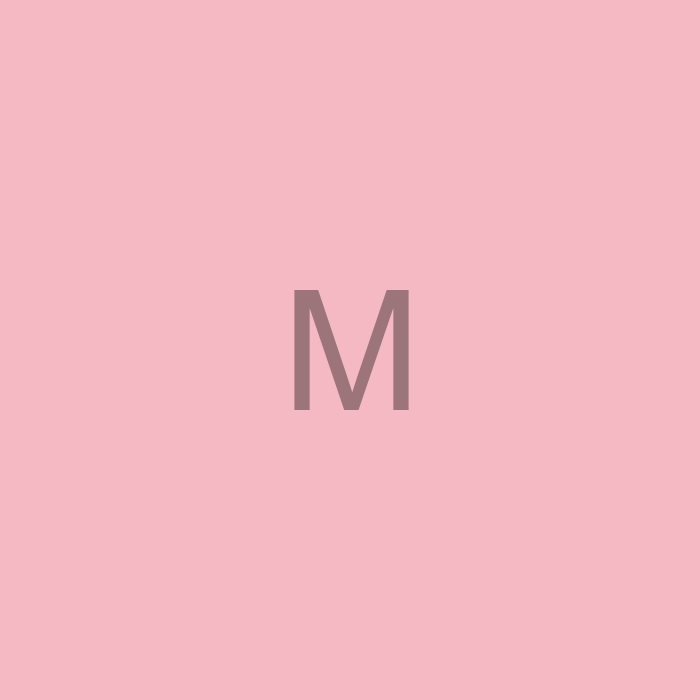
<style>
.page{position:relative;width:700px;height:700px;background:#f4b9c2}
.page>*{position:absolute;margin:0}
.t1{font:166.7px "ArialMT";color:#9b757a}
</style>
<div class="page">
<p class="t1" style="left:294px;top:290px;width:115px;height:120px">M</p>
</div>
